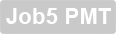
<style>
.page{position:relative;width:116px;height:34px;background:#c9c9c9}
.page>*{position:absolute;margin:0}
.t1{font:22.1px "Arial-BoldMT";color:#ffffff}
</style>
<div class="page">
<p class="t1" style="left:6px;top:8px;width:105px;height:16px">Job5 PMT</p>
</div>
